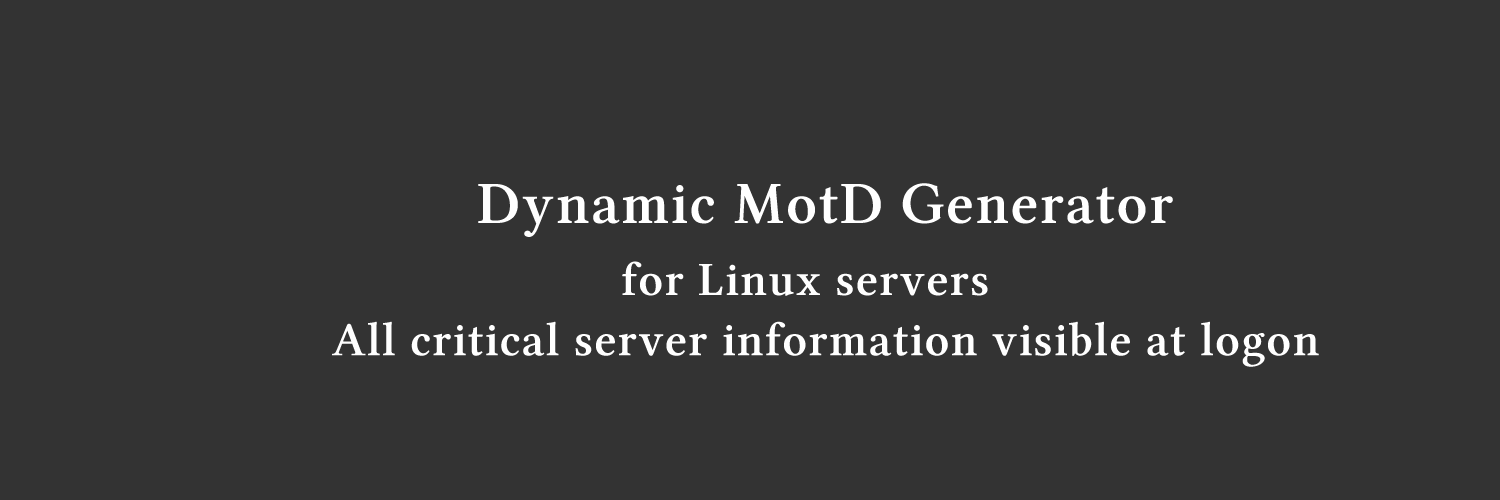
<style>
.page{position:relative;width:1500px;height:500px;background:#333333}
.page>*{position:absolute;margin:0}
.t1{font:60px "LinuxLibertineGZ";letter-spacing:0.025em;color:#ffffff}
.t2{font:48px "LinuxLibertineGZ";letter-spacing:0.025em;color:#ffffff}
</style>
<div class="page">
<p class="t1" style="left:478px;top:183px;width:695px;height:113px">Dynamic MotD Generator<br>   <span class="t2"> for Linux servers</span></p>
<p class="t2" style="left:332px;top:321px;width:987px;height:46px">All critical server information visible at logon</p>
</div>
